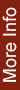
<style>
.page{position:relative;width:20px;height:90px;background:#842212}
.page>*{position:absolute;margin:0}
.t1{font:18px "ArialSpecialG1";color:#fffefe}
</style>
<div class="page">
<p class="t1" style="left:2px;top:7px;width:15px;height:75px;rotate:-90deg">More Info</p>
</div>
